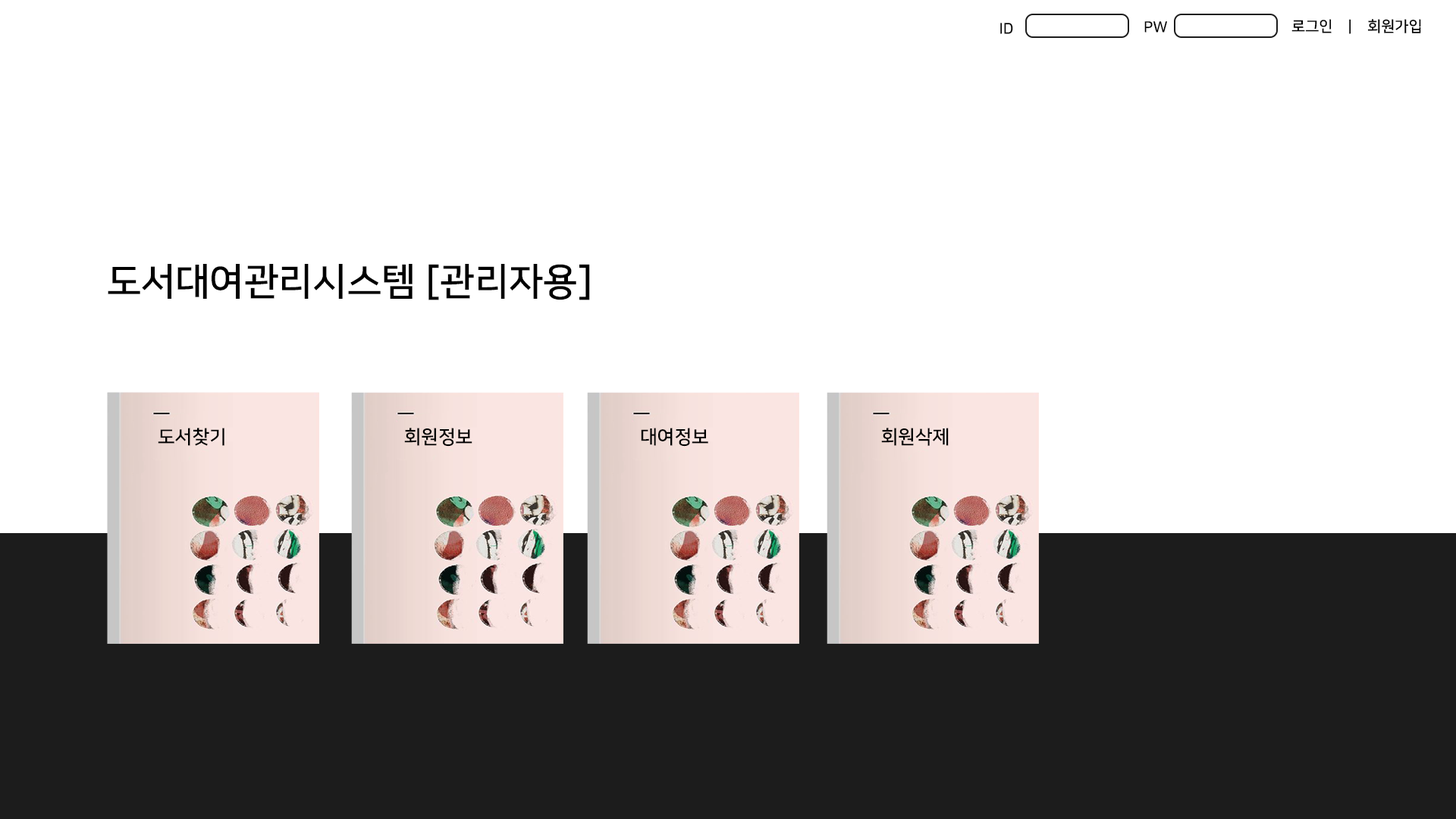
<style>
.page{position:relative;width:1456px;height:819px;background:#ffffff}
.page>*{position:absolute;margin:0}
.t1{font:15.1px "NanumSquareB";color:#000000}
.t2{font:37.8px "NanumSquareB";color:#000000}
.t3{font:18.9px "NanumSquareB";color:#000000}
</style>
<div class="page">
<p class="t1" style="left:1000px;top:23px;width:13px;height:11px">ID</p>
<p class="t1" style="left:1144px;top:21px;width:23px;height:12px">PW</p>
<p class="t1" style="left:1291px;top:19px;width:130px;height:15px">로그인    |    회원가입</p>
<p class="t2" style="left:108px;top:264px;width:482px;height:36px">도서대여관리시스템 [관리자용]</p>
<p class="t3" style="left:158px;top:428px;width:66px;height:18px">도서찾기</p>
<p class="t3" style="left:404px;top:428px;width:68px;height:19px">회원정보</p>
<p class="t3" style="left:641px;top:428px;width:67px;height:19px">대여정보</p>
<p class="t3" style="left:881px;top:428px;width:68px;height:18px">회원삭제</p>
</div>
